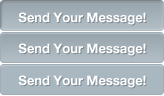
<style>
.page{position:relative;width:164px;height:96px;background:#a9b7c0}
.page>*{position:absolute;margin:0}
.t1{font:13px "HelveticaNeue-Bold";color:#ffffff}
</style>
<div class="page">
<p class="t1" style="left:18px;top:12px;width:128px;height:13px">Send Your Message!</p>
<p class="t1" style="left:18px;top:43px;width:128px;height:13px">Send Your Message!</p>
<p class="t1" style="left:18px;top:75px;width:128px;height:13px">Send Your Message!</p>
</div>
